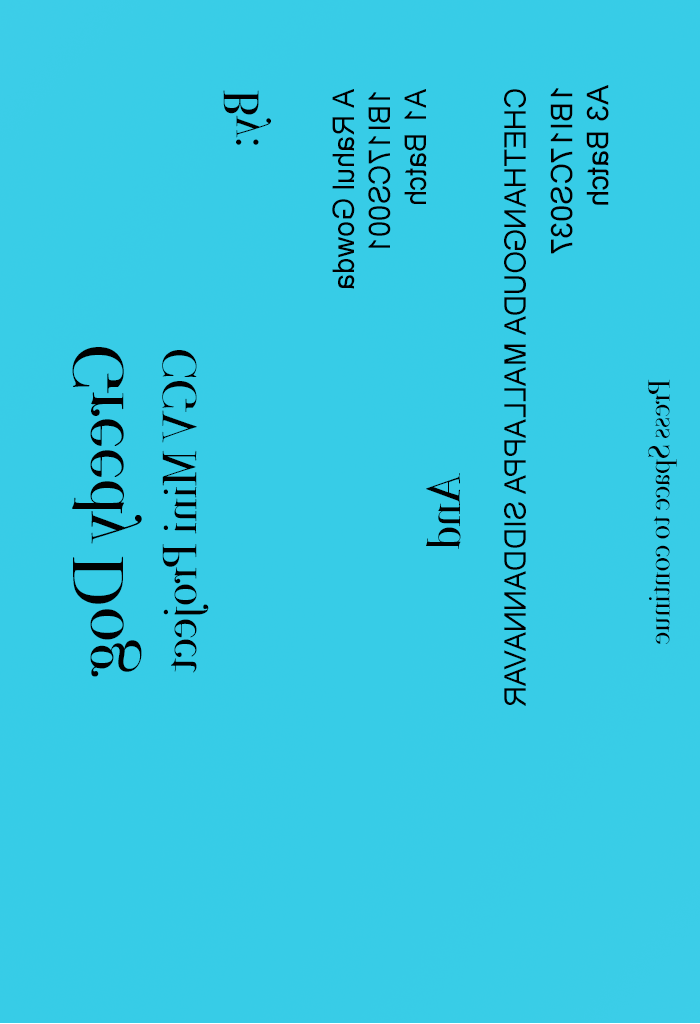
<style>
.page{position:relative;width:700px;height:1024px;background:#37cce7}
.page>*{position:absolute;margin:0}
.t1{font:30px "ArialMT";color:#000000;scale:0.96 1}
.t2{font:49.9px "BodoniSvtyTwoOSITCTT-Book";color:#000000;scale:0.96 1}
.t3{font:30px "ArialMT";color:#000000}
.t4{font:72px "BodoniSvtyTwoOSITCTT-Book";color:#000000}
.t5{font:48px "BodoniSvtyTwoOSITCTT-Book";color:#000000}
.t6{font:30px "BodoniSvtyTwoOSITCTT-Book";color:#000000}
</style>
<div class="page">
<p class="t1" style="left:223px;top:89px;width:204px;height:200px;rotate:90deg"><span class="t2">By:<br><br></span>A Rahul Gowda<br>1BI17CS001 <br>A1 Batch</p>
<p class="t3" style="left:504px;top:89px;width:22px;height:617px;rotate:90deg">CHETHANGOUDA MALLAPPA SIDDANNAVAR</p>
<p class="t3" style="left:550px;top:85px;width:59px;height:169px;rotate:90deg">1BI17CS037 <br>A3 Batch</p>
<p class="t4" style="left:72px;top:347px;width:70px;height:330px;rotate:90deg">Greedy Dog</p>
<p class="t5" style="left:162px;top:350px;width:47px;height:323px;rotate:90deg">CGV Mini Project</p>
<p class="t6" style="left:648px;top:379px;width:29px;height:265px;rotate:90deg">Press Space to continue</p>
<p class="t5" style="left:426px;top:473px;width:35px;height:76px;rotate:90deg">And</p>
</div>
